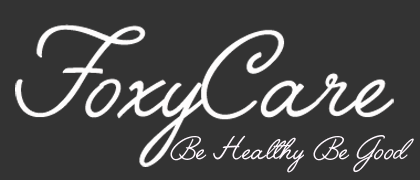
<style>
.page{position:relative;width:420px;height:180px;background:#333333}
.page>*{position:absolute;margin:0}
.t1{font:39.8px "Angelface";color:#fef7fe}
</style>
<div class="page">
<p class="t1" style="left:170px;top:135px;width:134px;height:38px">Be Healthy</p>
<p class="t1" style="left:313px;top:135px;width:101px;height:38px">Be Good</p>
</div>
